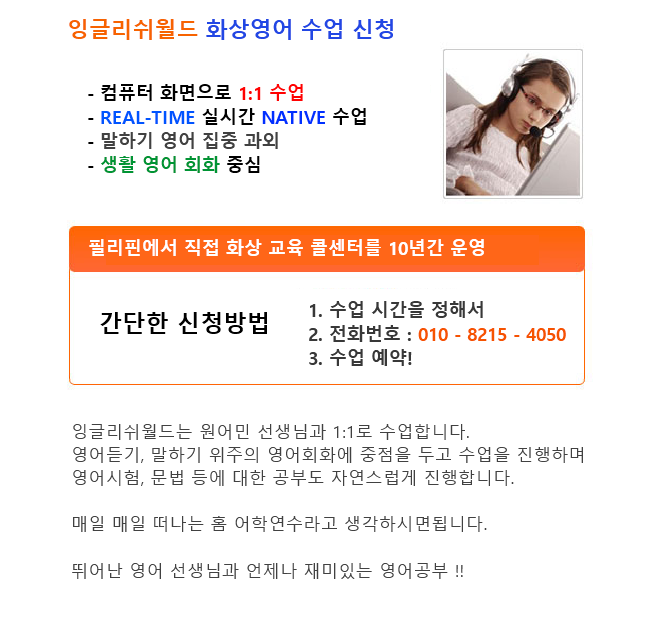
<style>
.page{position:relative;width:658px;height:644px;background:#ffffff}
.page>*{position:absolute;margin:0}
.t1{font:21.9px "MalgunGothicBold";color:#2247e4}
.t2{font:21.9px "MalgunGothicBold";color:#f76300}
.t3{font:18px/24px "MalgunGothicBold";color:#414141}
.t4{font:18px/24px "MalgunGothicBold";color:#000000}
.t5{font:18px/24px "MalgunGothicBold";color:#ff0202}
.t6{font:18px/24px "MalgunGothicBold";color:#0054ff}
.t7{font:18px/24px "MalgunGothicBold";color:#0030ff}
.t8{font:18px/24px "MalgunGothicBold";color:#009434}
.t9{font:18px "MalgunGothicBold";color:#ffffff}
.t10{font:18px/24px "MalgunGothicBold";color:#383838}
.t11{font:18px/24px "MalgunGothicBold";color:#f65300}
.t12{font:23.4px "MalgunGothicBold";color:#000000}
.t13{font:17.4px/23.2px "MalgunGothicRegular";color:#414141}
</style>
<div class="page">
<p class="t1" style="left:69px;top:19px;width:324px;height:21px"><span class="t2">잉글리쉬월드 </span>화상영어 수업 신청</p>
<p class="t3" style="left:88px;top:84px;width:278px;height:89px"><span class="t4">- 컴퓨터 화면으로 </span><span class="t5">1:1 수업 <br></span><span class="t4">- </span><span class="t6">REAL-TIME</span><span class="t4"> 실시간 </span><span class="t7">NATIVE</span><span class="t4"> 수업<br>- </span>말하기 영어 집중 과외<br><span class="t4">- </span><span class="t8">생활 영어 회화 </span><span class="t4">중심</span></p>
<p class="t9" style="left:89px;top:239px;width:395px;height:17px">필리핀에서 직접 화상 교육 콜센터를 10년간 운영</p>
<p class="t10" style="left:309px;top:301px;width:257px;height:65px">1. 수업 시간을 정해서<br>2. 전화번호 : <span class="t11">010 - 8215 - 4050<br></span>3. 수업 예약!</p>
<p class="t12" style="left:100px;top:312px;width:167px;height:22px">간단한 신청방법</p>
<p class="t13" style="left:72px;top:424px;width:511px;height:155px">잉글리쉬월드는 원어민 선생님과 1:1로 수업합니다.<br>영어듣기, 말하기 위주의 영어회화에 중점을 두고 수업을 진행하며<br>영어시험, 문법 등에 대한 공부도 자연스럽게 진행합니다.<br><br>매일 매일 떠나는 홈 어학연수라고 생각하시면됩니다.   <br><br>뛰어난 영어 선생님과 언제나 재미있는 영어공부 !!</p>
</div>
